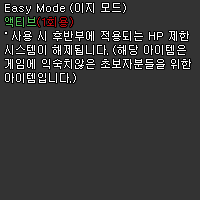
<style>
.page{position:relative;width:200px;height:200px;background:#333333}
.page>*{position:absolute;margin:0}
.t1{font:11px/14px "Dotum";color:#ffffff}
.t2{font:11px/14px "Dotum";color:#56c45b}
.t3{font:11px/14px "Dotum";color:#be0b0f}
</style>
<div class="page">
<p class="t1" style="left:5px;top:3px;width:186px;height:80px">Easy Mode (이지 모드)<br><span class="t2">액티브</span><span class="t3">(1회용)<br></span>˚ 사용 시 후반부에 적용되는 HP 제한<br>시스템이 해제됩니다. (해당 아이템은<br>게임에 익숙치않은 초보자분들을 위한<br>아이템입니다.)</p>
</div>
